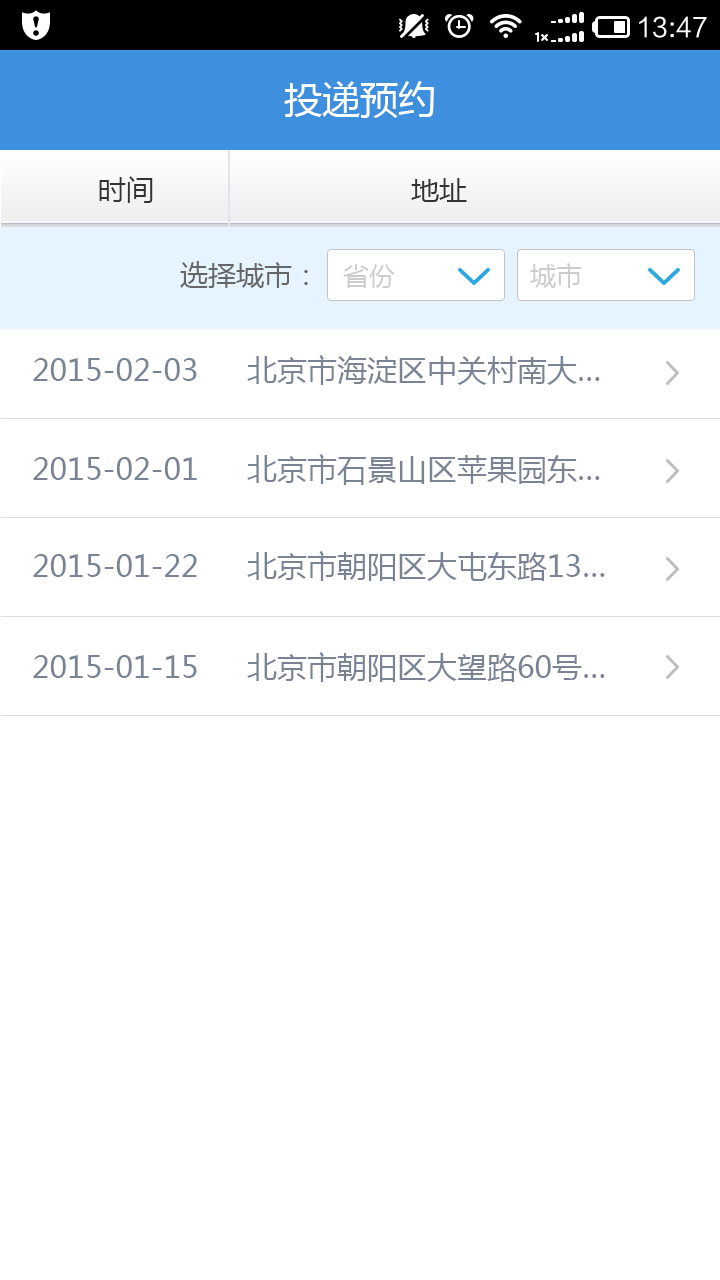
<style>
.page{position:relative;width:720px;height:1280px;background:#ffffff}
.page>*{position:absolute;margin:0}
.t1{font:38px "MicrosoftYaHei";color:#ffffff}
.t2{font:28px "MicrosoftYaHei";color:#333333}
.t3{font:28px "MicrosoftYaHei";color:#666666}
.t4{font:26px "MicrosoftYaHei";color:#cccccc}
.t5{font:30px "MicrosoftYaHei";color:#7a8394}
</style>
<div class="page">
<p class="t1" style="left:284px;top:81px;width:150px;height:37px">投递预约</p>
<p class="t2" style="left:99px;top:176px;width:368px;height:27px">时间                               地址</p>
<p class="t3" style="left:180px;top:261px;width:128px;height:27px">选择城市：</p>
<p class="t4" style="left:343px;top:264px;width:52px;height:24px">省份</p>
<p class="t4" style="left:530px;top:263px;width:52px;height:25px">城市</p>
<p class="t5" style="left:33px;top:358px;width:164px;height:23px">2015-02-03</p>
<p class="t5" style="left:247px;top:355px;width:353px;height:30px">北京市海淀区中关村南大…</p>
<p class="t5" style="left:33px;top:457px;width:164px;height:23px">2015-02-01</p>
<p class="t5" style="left:247px;top:454px;width:353px;height:31px">北京市石景山区苹果园东…</p>
<p class="t5" style="left:33px;top:554px;width:164px;height:23px">2015-01-22</p>
<p class="t5" style="left:247px;top:551px;width:358px;height:30px">北京市朝阳区大屯东路13…</p>
<p class="t5" style="left:247px;top:652px;width:358px;height:30px">北京市朝阳区大望路60号…</p>
<p class="t5" style="left:33px;top:655px;width:164px;height:23px">2015-01-15</p>
</div>
